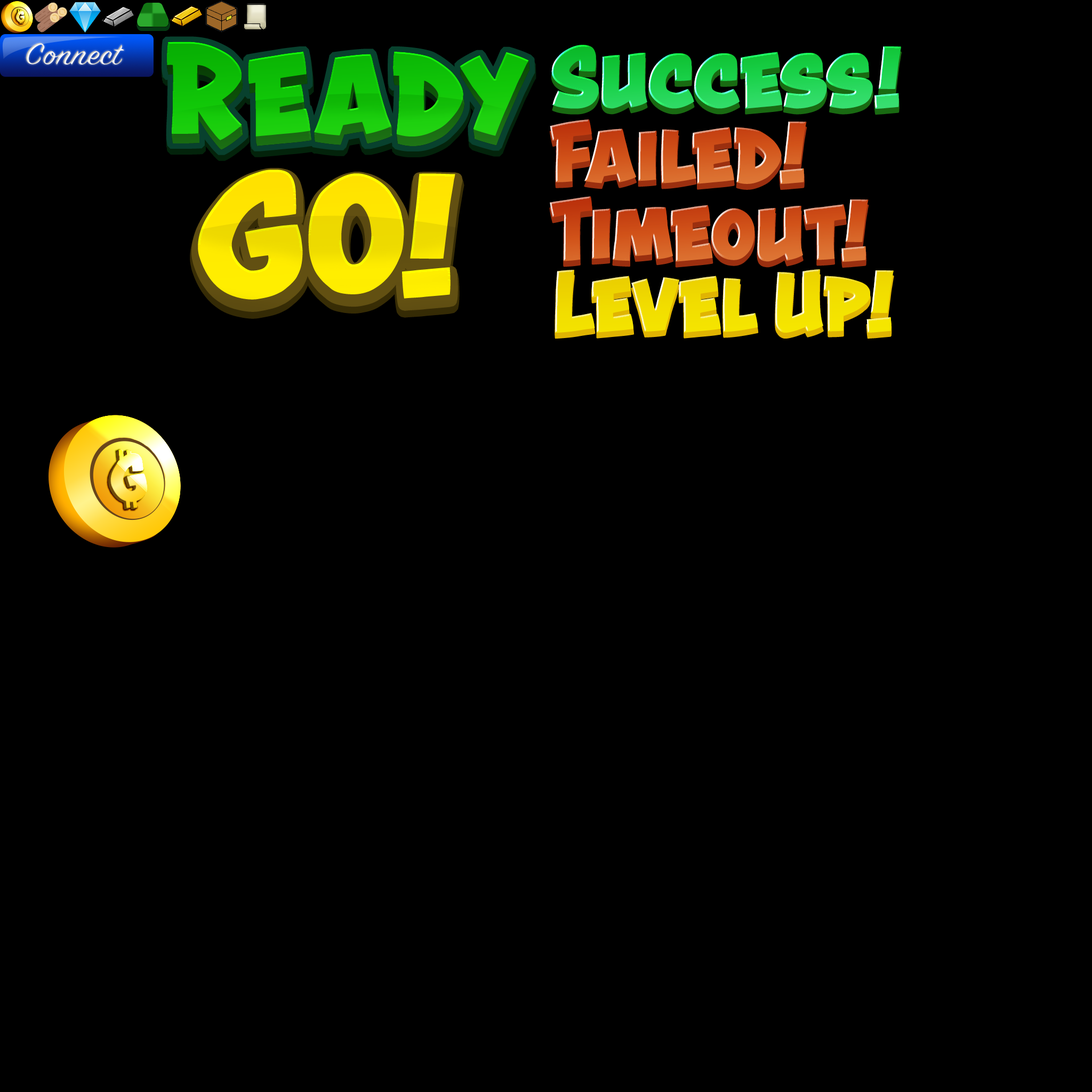
<style>
.page{position:relative;width:1092px;height:1092px;background:#000000}
.page>*{position:absolute;margin:0}
.t1{font:33.4px "SignPainter-HouseScript";letter-spacing:0.01em;scale:1.15 1}
.t2{font:92.8px "AstounderSquaredBB-Bold";letter-spacing:-0.02em;color:#19d149;scale:1.15 1}
.t3{font:92.8px "AstounderSquaredBB-Bold";letter-spacing:-0.02em;color:#d15219;scale:1.15 1}
.t4{font:92.8px "AstounderSquaredBB-Bold";letter-spacing:-0.02em;color:#f1dd00;scale:1.15 1}
</style>
<div class="page">
<p class="t1" style="left:26px;top:43px;width:98px;height:22px">Connect</p>
<p class="t2" style="left:551px;top:45px;width:350px;height:64px">Success!</p>
<p class="t3" style="left:550px;top:119px;width:257px;height:65px">Failed!</p>
<p class="t3" style="left:550px;top:196px;width:319px;height:66px">Timeout!</p>
<p class="t4" style="left:555px;top:269px;width:339px;height:64px">Level Up!</p>
</div>
